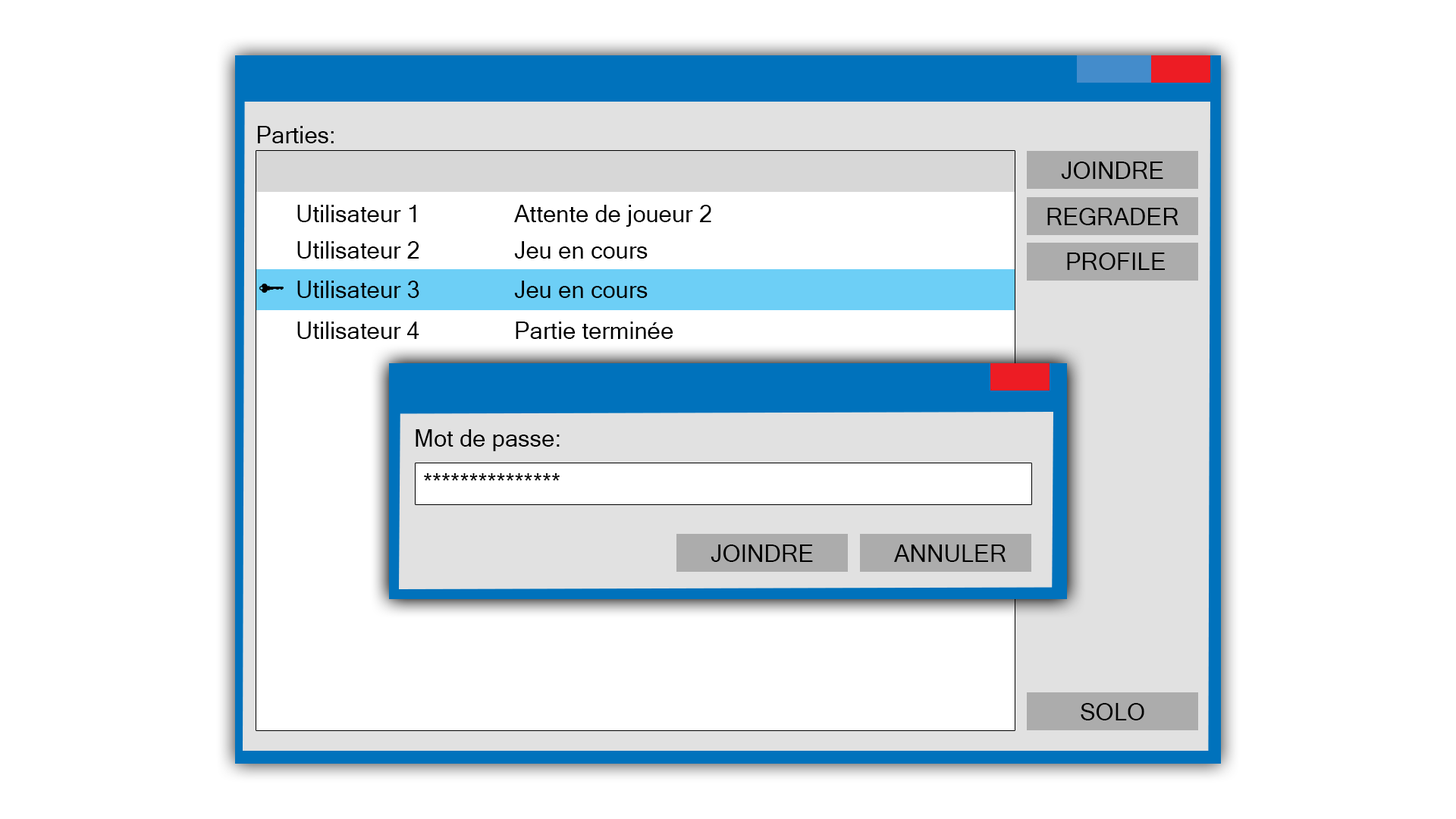
<style>
.page{position:relative;width:1456px;height:819px;background:#ffffff}
.page>*{position:absolute;margin:0}
.t1{font:23.5px "MicrosoftSansSerif";color:#000000}
</style>
<div class="page">
<p class="t1" style="left:258px;top:126px;width:76px;height:17px">Parties:</p>
<p class="t1" style="left:1061px;top:162px;width:102px;height:17px">JOINDRE</p>
<p class="t1" style="left:297px;top:205px;width:414px;height:22px">Utilisateur 1    Attente de joueur 2</p>
<p class="t1" style="left:1047px;top:208px;width:131px;height:17px">REGRADER</p>
<p class="t1" style="left:297px;top:241px;width:351px;height:18px">Utilisateur 2    Jeu en cours</p>
<p class="t1" style="left:1067px;top:253px;width:98px;height:17px">PROFILE</p>
<p class="t1" style="left:297px;top:281px;width:351px;height:17px">Utilisateur 3    Jeu en cours</p>
<p class="t1" style="left:297px;top:322px;width:376px;height:17px">Utilisateur 4    Partie terminée</p>
<p class="t1" style="left:416px;top:429px;width:144px;height:22px">Mot de passe:</p>
<p class="t1" style="left:424px;top:473px;width:136px;height:8px">***************</p>
<p class="t1" style="left:711px;top:544px;width:102px;height:18px">JOINDRE</p>
<p class="t1" style="left:894px;top:544px;width:112px;height:18px">ANNULER</p>
<p class="t1" style="left:1081px;top:703px;width:63px;height:17px">SOLO</p>
</div>
